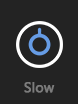
<style>
.page{position:relative;width:78px;height:104px;background:#232323}
.page>*{position:absolute;margin:0}
.t1{font:14px "SegoeUI";color:#7c7c7c;font-weight:bold}
</style>
<div class="page">
<p class="t1" style="left:24px;top:82px;width:31px;height:11px">Slow</p>
</div>
